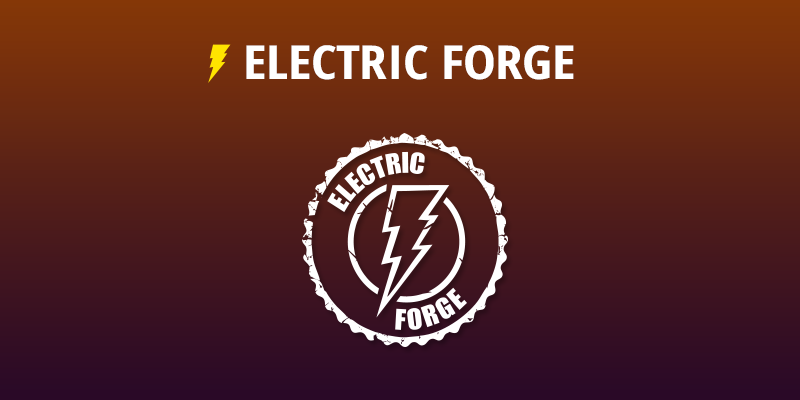
<style>
.page{position:relative;width:800px;height:400px}
.page>*{position:absolute;margin:0}
.t1{font:46.8px "OpenSans-CondensedBold";letter-spacing:-0.01em;color:#ffffff;text-transform:uppercase;scale:1.18 1}
</style>
<div class="page">
<p class="t1" style="left:246px;top:45px;width:328px;height:35px">ELECTRIC FORGE</p>
</div>
